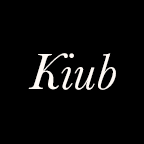
<style>
.page{position:relative;width:144px;height:144px;background:#000000}
.page>*{position:absolute;margin:0}
.t1{font:53.1px "Baskerville-Italic";color:#fffaf5}
</style>
<div class="page">
<p class="t1" style="left:28px;top:53px;width:88px;height:37px">Kiub</p>
</div>
